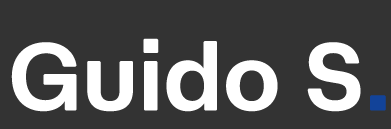
<style>
.page{position:relative;width:391px;height:129px;background:#333333}
.page>*{position:absolute;margin:0}
.t1{font:96.5px "AtAeroTRIAL-Semibold";color:#ffffff}
.t2{font:96.5px "AtAeroTRIAL-Semibold";color:#124399}
</style>
<div class="page">
<p class="t1" style="left:11px;top:38px;width:375px;height:74px">Guido S<span class="t2">.</span></p>
</div>
